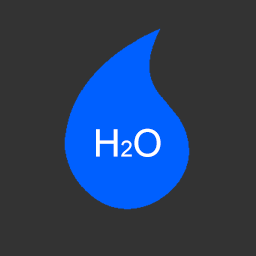
<style>
.page{position:relative;width:256px;height:256px;background:#333333}
.page>*{position:absolute;margin:0}
.t1{font:38.1px "ArialMT";color:#ffffff}
.t2{font:22.2px "ArialMT";color:#ffffff}
</style>
<div class="page">
<p class="t1" style="left:96px;top:128px;width:65px;height:29px">H<span class="t2">2</span>O</p>
</div>
